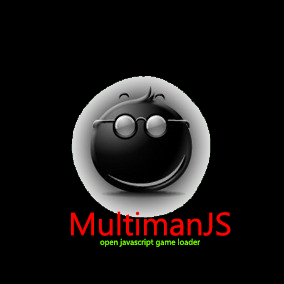
<style>
.page{position:relative;width:284px;height:284px;background:#000000}
.page>*{position:absolute;margin:0}
.t1{font:8px "MicrosoftTaiLe";color:#72ff00}
.t2{font:32px "MicrosoftTaiLe";color:#ff0000}
</style>
<div class="page">
<p class="t1" style="left:71px;top:211px;width:160px;height:36px;text-align:center"><span class="t2">MultimanJS<br></span>open javascript game loader</p>
</div>
